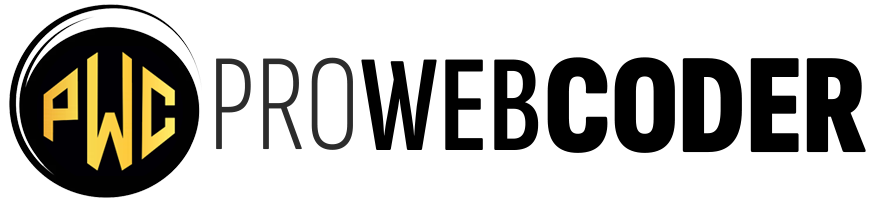
<style>
.page{position:relative;width:880px;height:200px;background:#ffffff}
.page>*{position:absolute;margin:0}
.t1{font:138.1px "SofiaSansExtraCondensed-Light";color:#2c2c2c}
.t2{font:138.1px "SofiaSansExtraCondensed-SemiBold";color:#000000}
.t3{font:143.1px "SofiaSansExtraCondensed-Black";color:#000000}
</style>
<div class="page">
<p class="t1" style="left:216px;top:57px;width:137px;height:93px">PRO</p>
<p class="t2" style="left:361px;top:59px;width:178px;height:91px">WEB</p>
<p class="t3" style="left:547px;top:57px;width:319px;height:96px">CODER</p>
</div>
